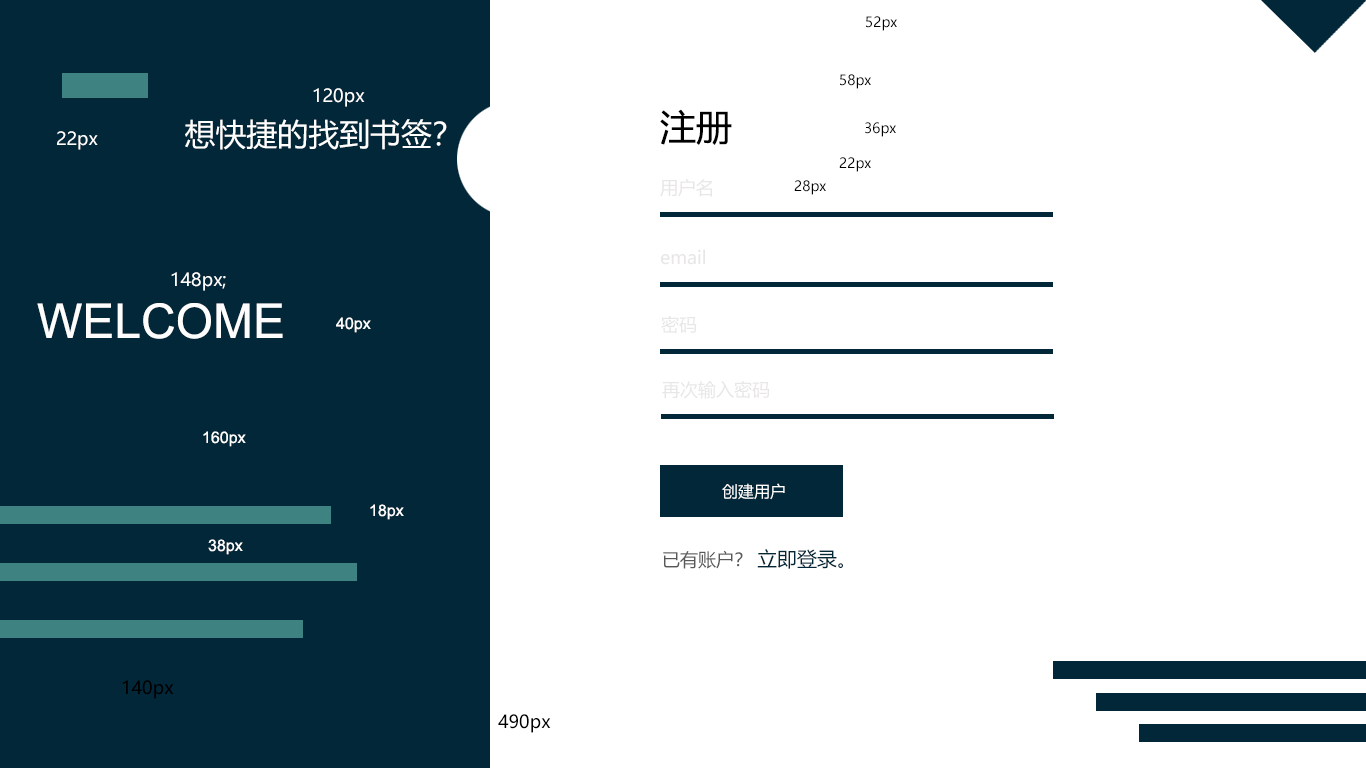
<style>
.page{position:relative;width:1366px;height:768px;background:#ffffff}
.page>*{position:absolute;margin:0}
.t1{font:14px "MicrosoftYaHei";color:#000000}
.t2{font:18px "MicrosoftYaHei";color:#ffffff}
.t3{font:36px "MicrosoftYaHei";color:#000000}
.t4{font:30.9px "MicrosoftYaHei";color:#ffffff}
.t5{font:18px "MicrosoftYaHei";color:#e8e6e6}
.t6{font:48px "ArialMT";color:#fdfdfd}
.t7{font:16px "ArialMT";color:#fdfdfd}
.t8{font:16px "MicrosoftYaHei";color:#ffffff}
.t9{font:18px "MicrosoftYaHei";color:#585858}
.t10{font:20px "MicrosoftYaHei";color:#022739}
.t11{font:18px "MicrosoftYaHei";color:#000000}
</style>
<div class="page">
<p class="t1" style="left:866px;top:16px;width:31px;height:15px">52px</p>
<p class="t1" style="left:840px;top:74px;width:31px;height:15px">58px</p>
<p class="t2" style="left:313px;top:88px;width:52px;height:19px">120px</p>
<p class="t3" style="left:660px;top:109px;width:72px;height:36px">注册</p>
<p class="t4" style="left:185px;top:119px;width:262px;height:31px">想快捷的找到书签？</p>
<p class="t1" style="left:865px;top:122px;width:31px;height:15px">36px</p>
<p class="t2" style="left:57px;top:131px;width:41px;height:19px">22px</p>
<p class="t1" style="left:839px;top:157px;width:32px;height:15px">22px</p>
<p class="t5" style="left:660px;top:178px;width:52px;height:19px">用户名</p>
<p class="t1" style="left:794px;top:180px;width:32px;height:15px">28px</p>
<p class="t5" style="left:661px;top:249px;width:44px;height:16px">email</p>
<p class="t2" style="left:171px;top:272px;width:55px;height:19px">148px;</p>
<p class="t6" style="left:37px;top:303px;width:246px;height:36px">WELCOME</p>
<p class="t7" style="left:336px;top:317px;width:35px;height:16px">40px</p>
<p class="t5" style="left:661px;top:315px;width:36px;height:19px">密码</p>
<p class="t5" style="left:662px;top:380px;width:108px;height:19px">再次输入密码</p>
<p class="t7" style="left:203px;top:431px;width:43px;height:16px">160px</p>
<p class="t8" style="left:722px;top:483px;width:63px;height:17px">创建用户</p>
<p class="t7" style="left:370px;top:504px;width:34px;height:16px">18px</p>
<p class="t7" style="left:208px;top:539px;width:35px;height:16px">38px</p>
<p class="t9" style="left:663px;top:550px;width:80px;height:19px">已有账户？</p>
<p class="t10" style="left:757px;top:549px;width:86px;height:20px">立即登录。</p>
<p class="t11" style="left:122px;top:680px;width:52px;height:19px">140px</p>
<p class="t11" style="left:498px;top:714px;width:53px;height:19px">490px</p>
</div>
